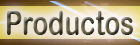
<style>
.page{position:relative;width:140px;height:45px}
.page>*{position:absolute;margin:0}
.t1{font:34px "ArialRoundedMTBold";scale:0.76 1}
</style>
<div class="page">
<p class="t1" style="left:7px;top:11px;width:126px;height:24px">Productos</p>
</div>
